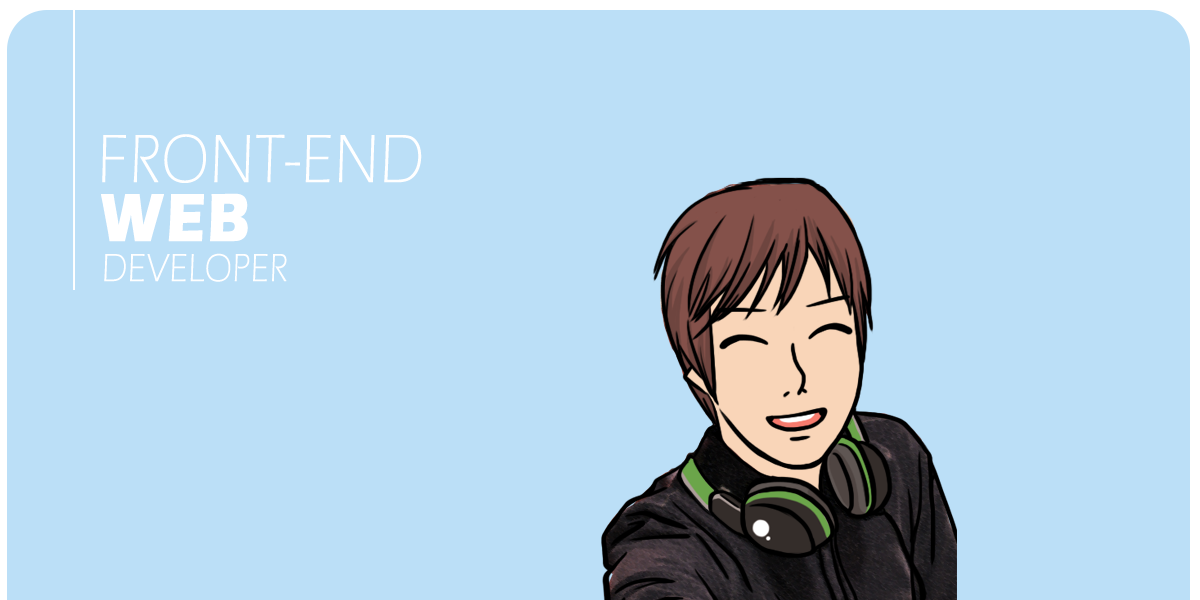
<style>
.page{position:relative;width:1200px;height:600px;background:#bbdff7}
.page>*{position:absolute;margin:0}
.t1{font:70px "ErasITC-Light";color:#ffffff;font-weight:bold;scale:0.86 1}
.t2{font:70px "ErasITC-Bold";color:#ffffff;font-weight:bold;scale:0.86 1}
.t3{font:40px "ErasITC-Light";color:#ffffff;font-weight:bold;scale:0.86 1}
</style>
<div class="page">
<p class="t1" style="left:102px;top:134px;width:320px;height:49px">FRONT-END</p>
<p class="t2" style="left:101px;top:193px;width:147px;height:49px">WEB</p>
<p class="t3" style="left:104px;top:253px;width:183px;height:29px">DEVELOPER</p>
</div>
